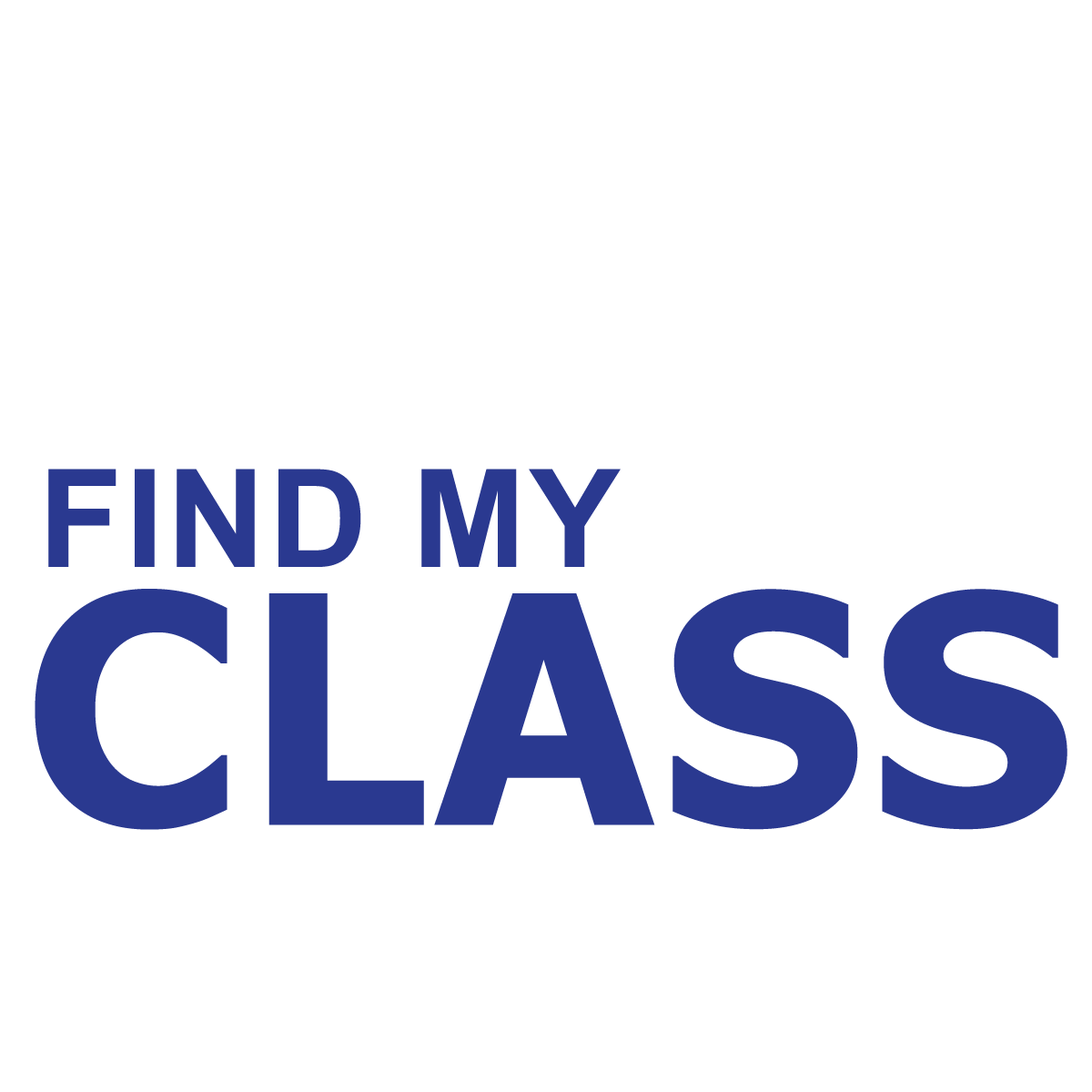
<style>
.page{position:relative;width:1092px;height:1092px;background:#ffffff}
.page>*{position:absolute;margin:0}
.t1{font:136.5px "Arial-BoldMT";letter-spacing:0.025em;color:#2a3990}
.t2{font:318.5px "Tahoma-Bold";letter-spacing:0.025em;color:#2a3990}
</style>
<div class="page">
<p class="t1" style="left:48px;top:469px;width:573px;height:98px">FIND MY</p>
<p class="t2" style="left:35px;top:589px;width:1032px;height:241px">CLASS</p>
</div>
